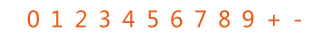
<style>
.page{position:relative;width:329px;height:38px;background:#ffffff}
.page>*{position:absolute;margin:0}
.t1{font:22px "MicrosoftYaHei";letter-spacing:0.5em;color:#eb5c1b}
</style>
<div class="page">
<p class="t1" style="left:27px;top:10px;width:274px;height:18px">0123456789+-</p>
</div>
